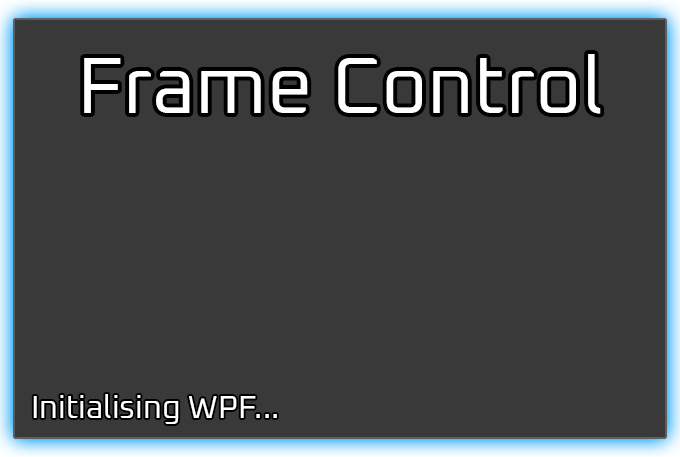
<style>
.page{position:relative;width:680px;height:457px;background:#393939}
.page>*{position:absolute;margin:0}
.t1{font:80px "Oxanium-Regular";color:#ffffff}
.t2{font:32px "Oxanium-Regular";color:#ffffff}
</style>
<div class="page">
<p class="t1" style="left:84px;top:54px;width:517px;height:60px">Frame Control</p>
<p class="t2" style="left:33px;top:394px;width:244px;height:30px">Initialising WPF...</p>
</div>
